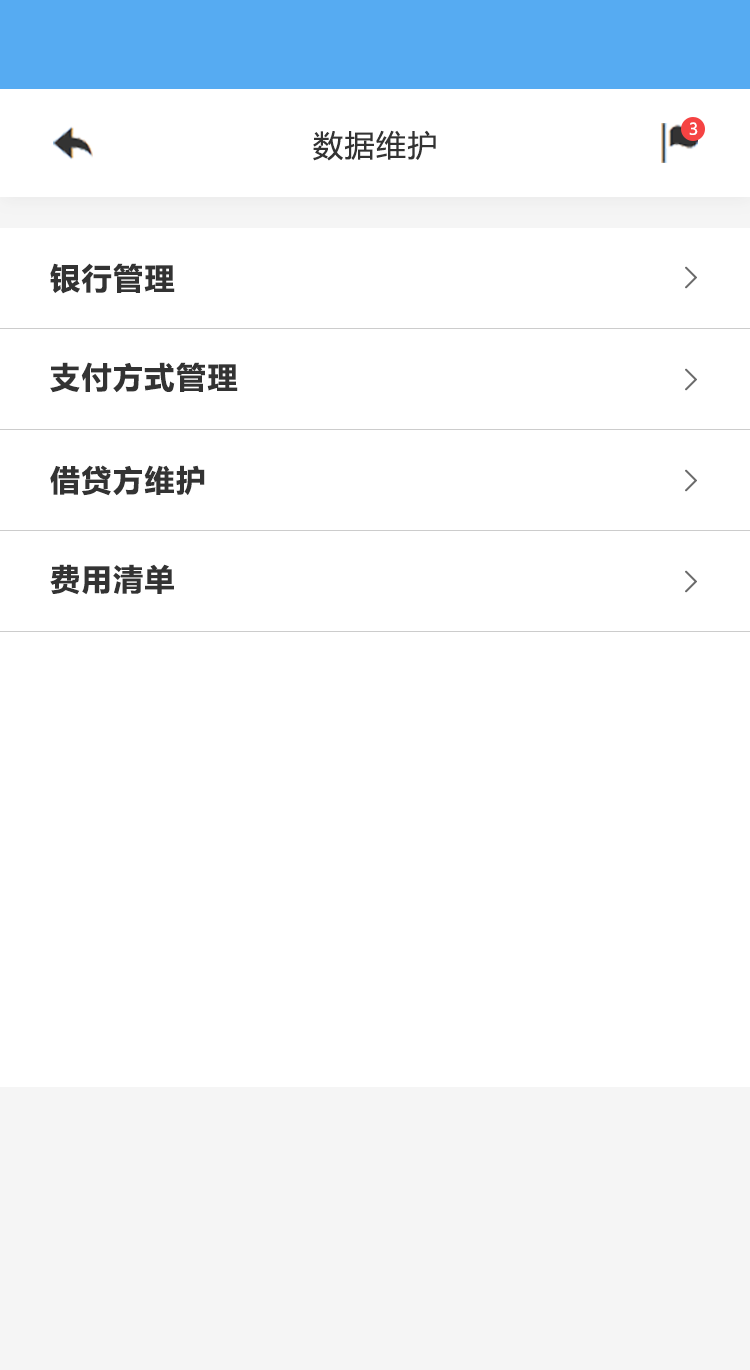
<style>
.page{position:relative;width:750px;height:1370px;background:#ffffff}
.page>*{position:absolute;margin:0}
.t1{font:16px "MicrosoftYaHeiUI";color:#ffffff}
.t2{font:30px "MicrosoftYaHeiUI";letter-spacing:0.05em;color:#333333}
.t3{font:30px "MicrosoftYaHeiUI-Bold";letter-spacing:0.05em;color:#333333}
.t4{font:30px "FangSong";letter-spacing:0.05em;color:#6c6c6c;font-weight:bold}
</style>
<div class="page">
<p class="t1" style="left:689px;top:122px;width:9px;height:13px">3</p>
<p class="t2" style="left:313px;top:130px;width:123px;height:31px">数据维护</p>
<p class="t3" style="left:50px;top:263px;width:125px;height:31px">银行管理</p>
<p class="t4" style="left:685px;top:266px;width:12px;height:23px">&gt;</p>
<p class="t3" style="left:50px;top:362px;width:188px;height:31px">支付方式管理</p>
<p class="t4" style="left:685px;top:368px;width:12px;height:23px">&gt;</p>
<p class="t3" style="left:50px;top:465px;width:155px;height:31px">借贷方维护</p>
<p class="t4" style="left:685px;top:469px;width:12px;height:23px">&gt;</p>
<p class="t3" style="left:50px;top:564px;width:124px;height:31px">费用清单</p>
<p class="t4" style="left:685px;top:570px;width:12px;height:23px">&gt;</p>
</div>
